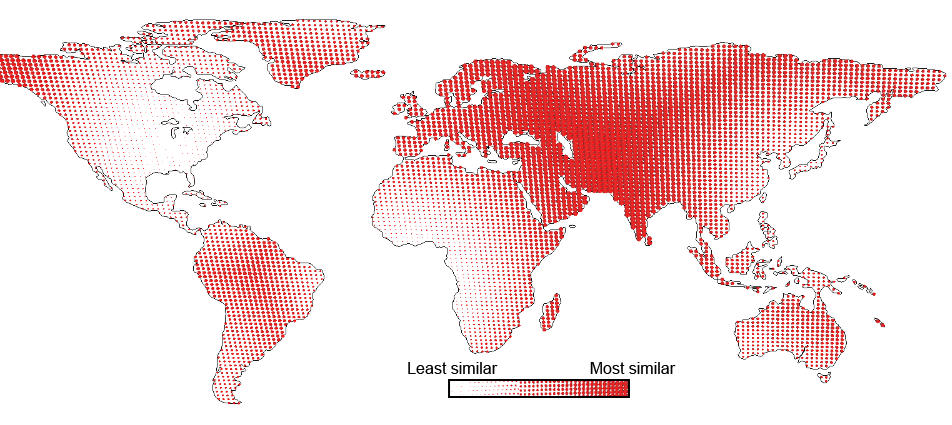
<style>
.page{position:relative;width:952px;height:425px;background:#ffffff}
.page>*{position:absolute;margin:0}
.t1{font:16px "ArialMT";color:#000000}
</style>
<div class="page">
<p class="t1" style="left:408px;top:362px;width:90px;height:12px">Least similar</p>
<p class="t1" style="left:590px;top:362px;width:86px;height:12px">Most similar</p>
</div>
